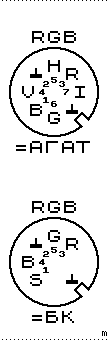
<style>
.page{position:relative;width:107px;height:340px;background:#ffffff}
.page>*{position:absolute;margin:0}
.t1{font:16px "Speccy";color:#000000}
.t2{font:16px "Speccy";letter-spacing:0.12em;color:#000000}
.t3{font:32px "zxSpectrumStrict";letter-spacing:0.12em;color:#000000}
</style>
<div class="page">
<p class="t1" style="left:32px;top:31px;width:44px;height:12px">RGB</p>
<p class="t1" style="left:48px;top:60px;width:12px;height:12px">H</p>
<p class="t2" style="left:66px;top:68px;width:12px;height:12px">R</p>
<p class="t1" style="left:22px;top:86px;width:12px;height:12px">V</p>
<p class="t1" style="left:75px;top:86px;width:10px;height:12px">I</p>
<p class="t2" style="left:30px;top:104px;width:12px;height:12px">B</p>
<p class="t1" style="left:48px;top:112px;width:12px;height:12px">G</p>
<p class="t1" style="left:32px;top:201px;width:44px;height:12px">RGB</p>
<p class="t3" style="left:48px;top:230px;width:12px;height:12px">G</p>
<p class="t3" style="left:66px;top:238px;width:12px;height:12px">R</p>
<p class="t3" style="left:22px;top:256px;width:12px;height:12px">B</p>
<p class="t3" style="left:30px;top:274px;width:12px;height:12px">S</p>
</div>
